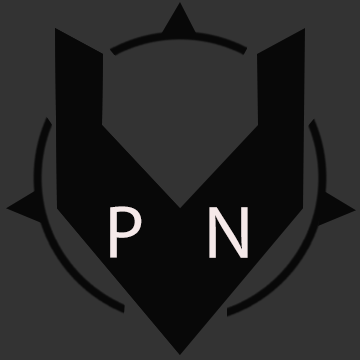
<style>
.page{position:relative;width:360px;height:360px;background:#333333}
.page>*{position:absolute;margin:0}
.t1{font:75px "MyriadPro-Regular";color:#f5e9e9}
</style>
<div class="page">
<p class="t1" style="left:110px;top:206px;width:32px;height:52px">P</p>
<p class="t1" style="left:209px;top:207px;width:39px;height:51px">N</p>
</div>
